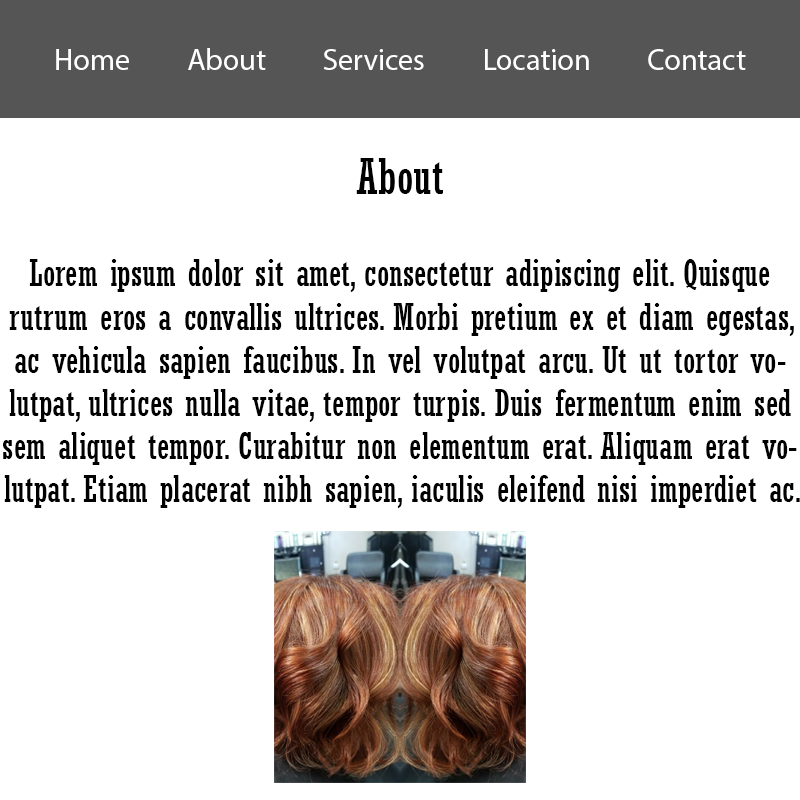
<style>
.page{position:relative;width:800px;height:800px;background:#ffffff}
.page>*{position:absolute;margin:0}
.t1{font:30px "MyriadPro-Regular";color:#ffffff}
.t2{font:48px "Rockwell-Condensed";color:#000000}
.t3{font:36px "Rockwell-Condensed";color:#000000}
</style>
<div class="page">
<p class="t1" style="left:56px;top:48px;width:690px;height:22px">Home         About         Services         Location         Contact</p>
<p class="t2" style="left:356px;top:158px;width:87px;height:36px">About</p>
<p class="t3" style="left:3px;top:259px;width:797px;height:249px;text-align:center">Lorem ipsum dolor sit amet, consectetur adipiscing elit. Quisque rutrum eros a convallis ultrices. Morbi pretium ex et diam egestas, ac vehicula sapien faucibus. In vel volutpat arcu. Ut ut tortor volutpat, ultrices nulla vitae, tempor turpis. Duis fermentum enim sed sem aliquet tempor. Curabitur non elementum erat. Aliquam erat volutpat. Etiam placerat nibh sapien, iaculis eleifend nisi imperdiet ac.</p>
</div>
